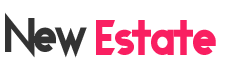
<style>
.page{position:relative;width:240px;height:70px;background:#ffffff}
.page>*{position:absolute;margin:0}
.t1{font:55.4px "Transmetals";letter-spacing:-0.05em;color:#333333;scale:0.9 1}
.t2{font:57.5px "Transmetals";letter-spacing:-0.05em;color:#f91f61;scale:0.9 1}
</style>
<div class="page">
<p class="t1" style="left:5px;top:12px;width:82px;height:46px">New</p>
<p class="t2" style="left:96px;top:20px;width:120px;height:35px">Estate</p>
</div>
